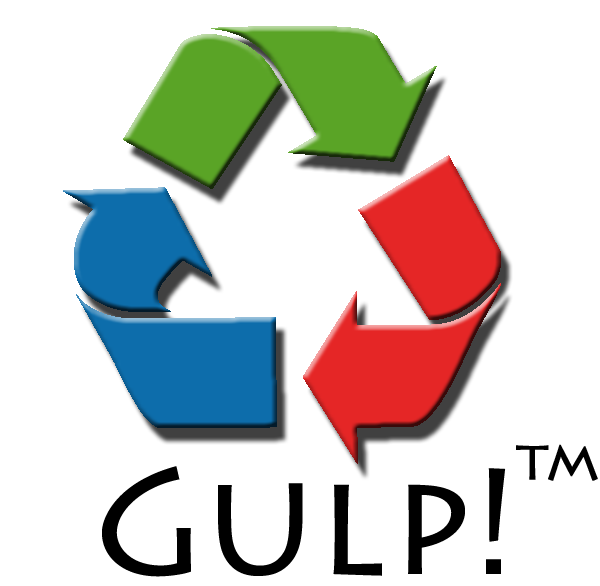
<style>
.page{position:relative;width:600px;height:586px;background:#ffffff}
.page>*{position:absolute;margin:0}
.t1{font:48px "LithosPro-Regular";color:#000000;font-weight:bold}
.t2{font:150px "LithosPro-Regular";color:#000000}
</style>
<div class="page">
<p class="t1" style="left:516px;top:444px;width:82px;height:37px">TM</p>
<p class="t2" style="left:102px;top:466px;width:404px;height:111px">Gulp!</p>
</div>
